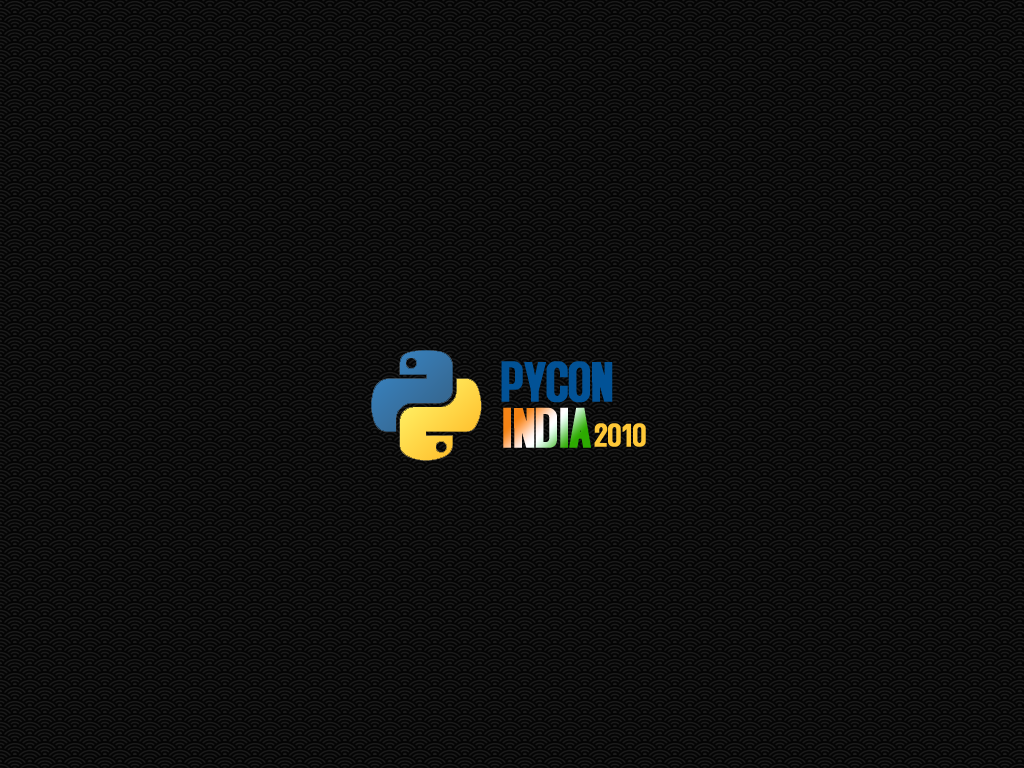
<style>
.page{position:relative;width:1024px;height:768px}
.page>*{position:absolute;margin:0}
.t1{font:60px "AccidentalPresidency";letter-spacing:-0.025em;color:#025296;text-transform:uppercase;font-weight:bold}
.t2{font:60px "AccidentalPresidency";letter-spacing:-0.025em;text-transform:uppercase;font-weight:bold}
.t3{font:36px "AccidentalPresidency";letter-spacing:-0.025em;color:#ffc837;text-transform:uppercase;font-weight:bold}
</style>
<div class="page">
<p class="t1" style="left:501px;top:361px;width:112px;height:42px">pycon</p>
<p class="t2" style="left:503px;top:407px;width:88px;height:41px">india</p>
<p class="t3" style="left:594px;top:423px;width:52px;height:24px">2010</p>
</div>
